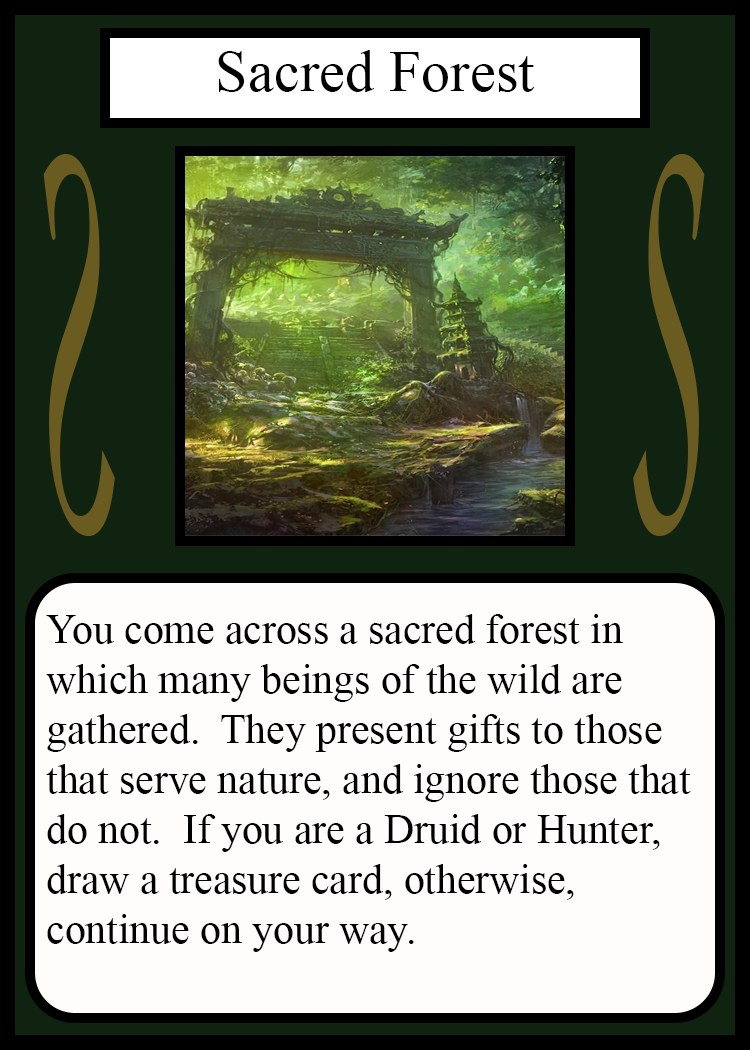
<style>
.page{position:relative;width:750px;height:1050px;background:#fffcfc}
.page>*{position:absolute;margin:0}
.t1{font:58.3px "TimesNewRomanPSMT";color:#010101}
.t2{font:548.5px "Apple-Chancery";color:#6a5c21;scale:0.27 1}
.t3{font:548.2px "Apple-Chancery";color:#6a5c21;scale:0.27 1}
.t4{font:41.7px "TimesNewRomanPSMT";color:#000000}
</style>
<div class="page">
<p class="t1" style="left:218px;top:50px;width:317px;height:42px">Sacred Forest</p>
<p class="t2" style="left:43px;top:154px;width:72px;height:382px;rotate:180deg">S</p>
<p class="t3" style="left:633px;top:154px;width:72px;height:382px">S</p>
<p class="t4" style="left:46px;top:614px;width:645px;height:338px">You come across a sacred forest in<br>which many beings of the wild are <br>gathered.  They present gifts to those<br>that serve nature, and ignore those that <br>do not.  If you are a Druid or Hunter,<br>draw a treasure card, otherwise, <br>continue on your way.</p>
</div>
